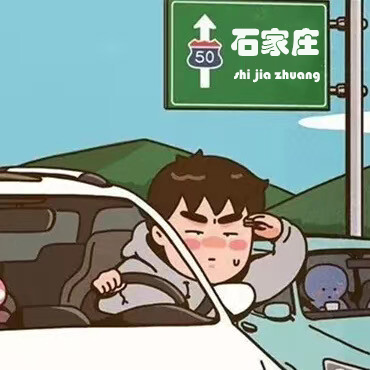
<style>
.page{position:relative;width:370px;height:370px}
.page>*{position:absolute;margin:0}
.t1{font:30px "STHupo";color:#f3faf4}
.t2{font:14px "STHupo";color:#f3faf4}
</style>
<div class="page">
<p class="t1" style="left:231px;top:28px;width:88px;height:28px">石家庄</p>
<p class="t2" style="left:234px;top:69px;width:86px;height:14px">shi jia zhuang</p>
</div>
